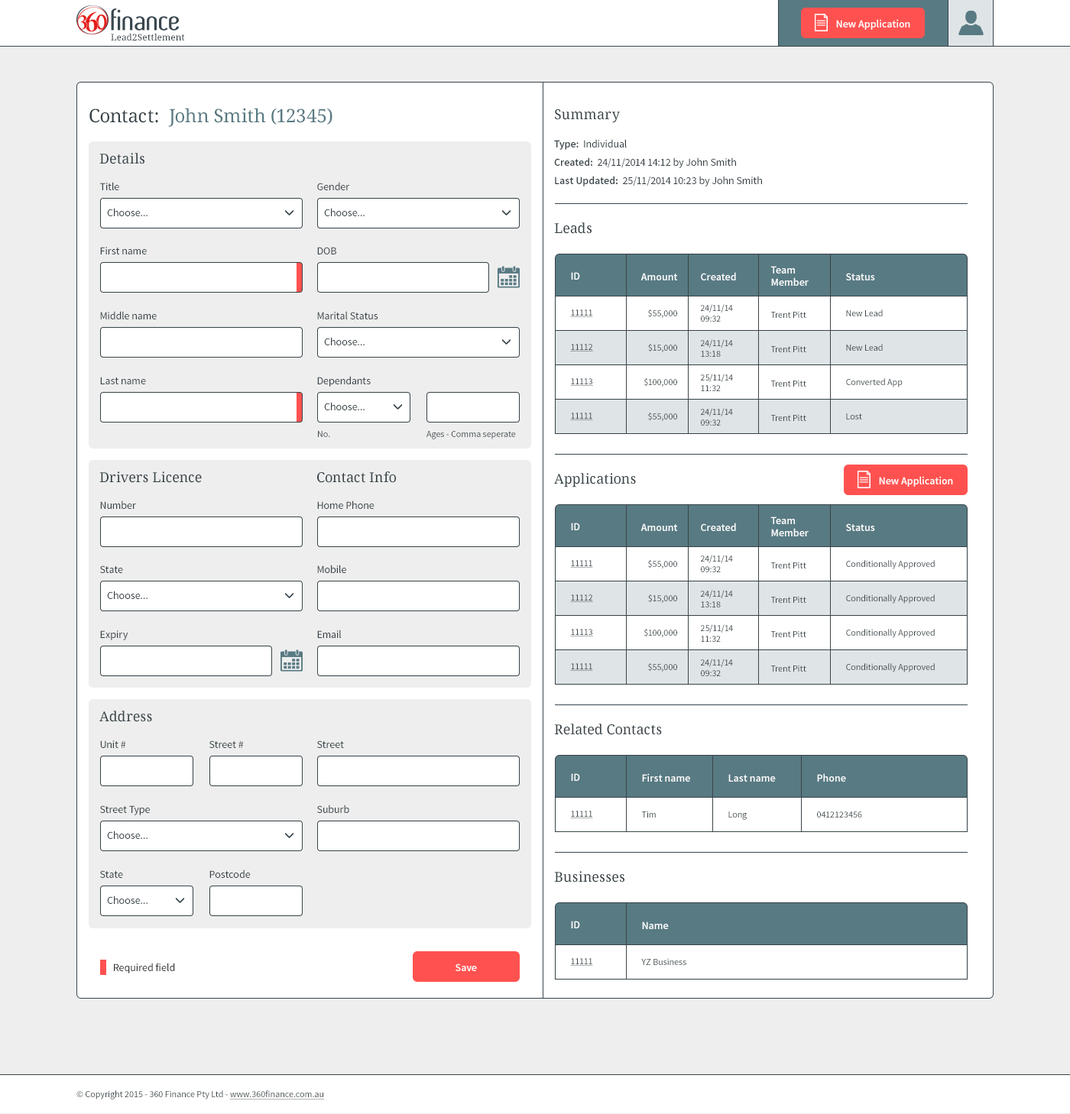
<style>
.page{position:relative;width:1070px;height:1114px;background:#ffffff}
.page>*{position:absolute;margin:0}
.t1{font:10.7px "SourceSansPro-Semibold";color:#ffffff}
.t2{font:9.2px "DroidSerif";color:#364247}
.t3{font:18.3px "DroidSerif";color:#587a83}
.t4{font:18.3px "DroidSerif";color:#364247}
.t5{font:13.8px "DroidSerif";color:#364247}
.t6{font:10.7px/18.3px "SourceSansPro-Regular";color:#364247}
.t7{font:10.7px/18.3px "SourceSansPro-Semibold";color:#364247}
.t8{font:10.7px "SourceSansPro-Regular";color:#364247}
.t9{font:9.2px/34.4px "SourceSansPro-Regular";color:#364247;text-decoration:underline}
.t10{font:10.7px/34.4px "SourceSansPro-Semibold";color:#ffffff}
.t11{font:9.2px/35.9px "SourceSansPro-Regular";color:#364247;text-decoration:underline}
.t12{font:9.2px/30.6px "SourceSansPro-Regular";color:#364247}
.t13{font:9.2px/10.7px "SourceSansPro-Regular";color:#364247}
.t14{font:9.2px/24.5px "SourceSansPro-Regular";color:#364247}
.t15{font:9.2px/23.7px "SourceSansPro-Regular";color:#364247}
.t16{font:9.2px "SourceSansPro-Regular";color:#364247}
.t17{font:9.2px/34.4px "SourceSansPro-Regular";color:#364247}
.t18{font:9.2px/35.9px "SourceSansPro-Regular";color:#364247}
.t19{font:10.7px "SourceSansPro-Regular";color:#333333}
.t20{font:9.2px "SourceSansPro-Regular";color:#364247;text-decoration:underline}
</style>
<div class="page">
<p class="t1" style="left:836px;top:19px;width:74px;height:11px">New Application</p>
<p class="t2" style="left:111px;top:34px;width:74px;height:7px">Lead2Settlement</p>
<p class="t3" style="left:89px;top:108px;width:243px;height:19px"><span class="t4">Contact:  </span>John Smith (12345)</p>
<p class="t5" style="left:555px;top:109px;width:65px;height:14px">Summary</p>
<p class="t6" style="left:554px;top:139px;width:208px;height:47px"><span class="t7">Type:  </span>Individual<br><span class="t7">Created:  </span>24/11/2014 14:12 by John Smith<br><span class="t7">Last Updated:  </span>25/11/2014 10:23 by John Smith</p>
<p class="t5" style="left:99px;top:153px;width:45px;height:11px">Details</p>
<p class="t8" style="left:100px;top:182px;width:19px;height:8px">Title</p>
<p class="t8" style="left:317px;top:182px;width:32px;height:8px">Gender</p>
<p class="t8" style="left:107px;top:208px;width:41px;height:8px">Choose...</p>
<p class="t8" style="left:324px;top:208px;width:41px;height:8px">Choose...</p>
<p class="t5" style="left:554px;top:222px;width:38px;height:12px">Leads</p>
<p class="t8" style="left:100px;top:247px;width:47px;height:8px">First name</p>
<p class="t8" style="left:317px;top:247px;width:19px;height:8px">DOB</p>
<p class="t9" style="left:570px;top:272px;width:23px;height:148px"><span class="t10">ID<br></span><span class="t11">11111<br></span>11112<br>11113<br>11111</p>
<p class="t12" style="left:700px;top:272px;width:36px;height:154px"><span class="t10">Created<br></span>24/11/14<br><span class="t13">09:32<br></span><span class="t14">24/11/14<br></span><span class="t13">13:18<br></span><span class="t15">25/11/14<br></span><span class="t13">11:32<br></span><span class="t15">24/11/14<br></span><span class="t13">09:32</span></p>
<p class="t8" style="left:100px;top:311px;width:57px;height:8px">Middle name</p>
<p class="t8" style="left:317px;top:311px;width:61px;height:8px">Marital Status</p>
<p class="t8" style="left:324px;top:337px;width:41px;height:8px">Choose...</p>
<p class="t8" style="left:100px;top:377px;width:46px;height:7px">Last name</p>
<p class="t8" style="left:317px;top:376px;width:54px;height:11px">Dependants</p>
<p class="t8" style="left:324px;top:402px;width:41px;height:8px">Choose...</p>
<p class="t16" style="left:318px;top:431px;width:12px;height:6px">No.</p>
<p class="t16" style="left:426px;top:431px;width:90px;height:8px">Ages - Comma seperate</p>
<p class="t5" style="left:99px;top:472px;width:103px;height:11px">Drivers Licence</p>
<p class="t5" style="left:317px;top:472px;width:79px;height:11px">Contact Info</p>
<p class="t5" style="left:554px;top:473px;width:82px;height:15px">Applications</p>
<p class="t1" style="left:879px;top:476px;width:74px;height:11px">New Application</p>
<p class="t8" style="left:100px;top:501px;width:36px;height:8px">Number</p>
<p class="t8" style="left:317px;top:501px;width:58px;height:8px">Home Phone</p>
<p class="t9" style="left:570px;top:523px;width:23px;height:148px"><span class="t10">ID<br></span><span class="t11">11111<br></span>11112<br>11113<br>11111</p>
<p class="t12" style="left:700px;top:523px;width:36px;height:153px"><span class="t10">Created<br></span>24/11/14<br><span class="t13">09:32<br></span><span class="t14">24/11/14<br></span><span class="t13">13:18<br></span><span class="t15">25/11/14<br></span><span class="t13">11:32<br></span><span class="t15">24/11/14<br></span><span class="t13">09:32</span></p>
<p class="t17" style="left:846px;top:524px;width:89px;height:149px"><span class="t10">Status<br></span><span class="t18">Conditionally Approved<br></span>Conditionally Approved<br>Conditionally Approved<br>Conditionally Approved</p>
<p class="t8" style="left:100px;top:566px;width:23px;height:7px">State</p>
<p class="t8" style="left:317px;top:565px;width:29px;height:8px">Mobile</p>
<p class="t8" style="left:107px;top:591px;width:41px;height:8px">Choose...</p>
<p class="t8" style="left:317px;top:630px;width:25px;height:8px">Email</p>
<p class="t8" style="left:100px;top:631px;width:28px;height:9px">Expiry</p>
<p class="t5" style="left:99px;top:711px;width:53px;height:11px">Address</p>
<p class="t5" style="left:554px;top:724px;width:108px;height:11px">Related Contacts</p>
<p class="t8" style="left:100px;top:741px;width:26px;height:7px">Unit #</p>
<p class="t8" style="left:209px;top:741px;width:35px;height:7px">Street #</p>
<p class="t8" style="left:317px;top:741px;width:27px;height:7px">Street</p>
<p class="t8" style="left:100px;top:806px;width:50px;height:10px">Street Type</p>
<p class="t8" style="left:317px;top:805px;width:32px;height:8px">Suburb</p>
<p class="t8" style="left:107px;top:831px;width:41px;height:8px">Choose...</p>
<p class="t8" style="left:209px;top:870px;width:42px;height:8px">Postcode</p>
<p class="t8" style="left:100px;top:871px;width:23px;height:7px">State</p>
<p class="t5" style="left:554px;top:871px;width:70px;height:12px">Businesses</p>
<p class="t8" style="left:107px;top:896px;width:41px;height:8px">Choose...</p>
<p class="t19" style="left:114px;top:963px;width:61px;height:11px">Required field</p>
<p class="t1" style="left:456px;top:964px;width:21px;height:7px">Save</p>
<p class="t16" style="left:76px;top:1091px;width:249px;height:9px">© Copyright 2015 - 360 Finance Pty Ltd - <span class="t20">www.360finance.com.au</span></p>
</div>
